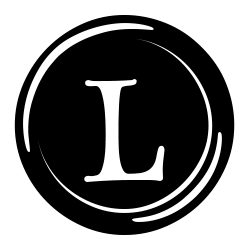
<style>
.page{position:relative;width:250px;height:250px;background:#000000}
.page>*{position:absolute;margin:0}
.t1{font:293.2px "TypeKeysFilled";letter-spacing:0.02em;color:#000000}
</style>
<div class="page">
<p class="t1" style="left:14px;top:15px;width:221px;height:220px">L</p>
</div>
